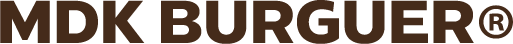
<style>
.page{position:relative;width:513px;height:44px;background:#452b1a}
.page>*{position:absolute;margin:0}
.t1{font:60px "FONTSPRINGDEMO-RadiateSansBold";color:#452b1a}
.t2{font:100px "MyriadPro-Regular";color:#452b1a}
</style>
<div class="page">
<p class="t1" style="left:0px;top:0px;width:474px;height:44px">MDK BURGUER</p>
<p class="t2" style="left:479px;top:5px;width:34px;height:34px">®</p>
</div>
